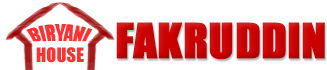
<style>
.page{position:relative;width:327px;height:70px;background:#ffffff}
.page>*{position:absolute;margin:0}
.t1{font:16.3px "Impact";color:#ff3333;text-transform:uppercase}
.t2{font:45px "Impact";color:#cc0000;text-transform:uppercase;font-weight:bold}
.t3{font:18.2px "Impact";color:#ff3333;text-transform:uppercase}
</style>
<div class="page">
<p class="t1" style="left:26px;top:24px;width:67px;height:18px">biryani</p>
<p class="t2" style="left:116px;top:22px;width:209px;height:38px">fakruddin</p>
<p class="t3" style="left:36px;top:47px;width:48px;height:16px">house</p>
</div>
